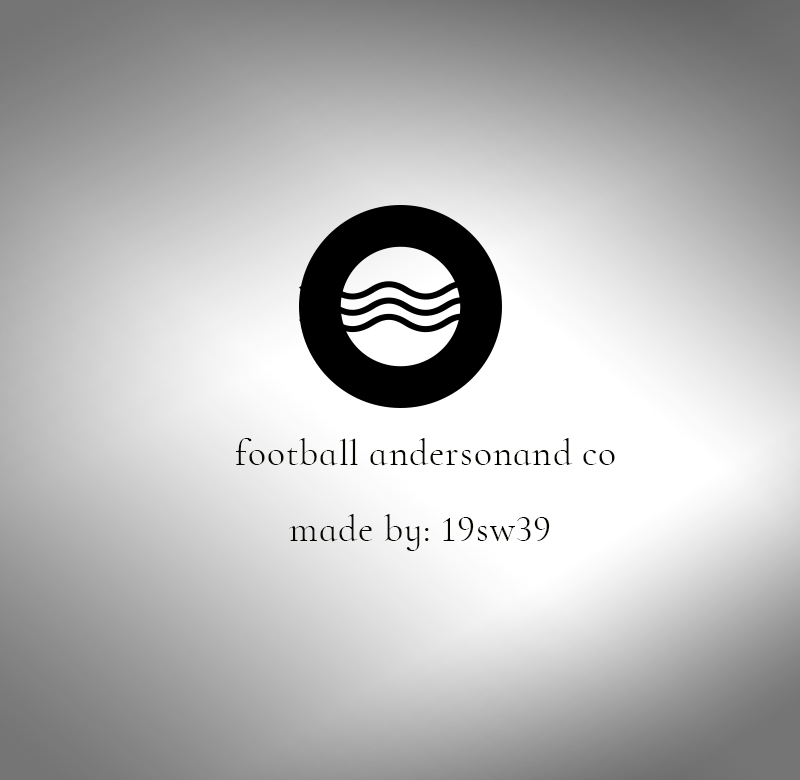
<style>
.page{position:relative;width:800px;height:780px}
.page>*{position:absolute;margin:0}
.t1{font:37.5px "CormorantInfant-Regular";letter-spacing:0.025em;color:#060601}
</style>
<div class="page">
<p class="t1" style="left:235px;top:438px;width:380px;height:28px">football andersonand co</p>
<p class="t1" style="left:289px;top:514px;width:261px;height:37px">made by: 19sw39</p>
</div>
